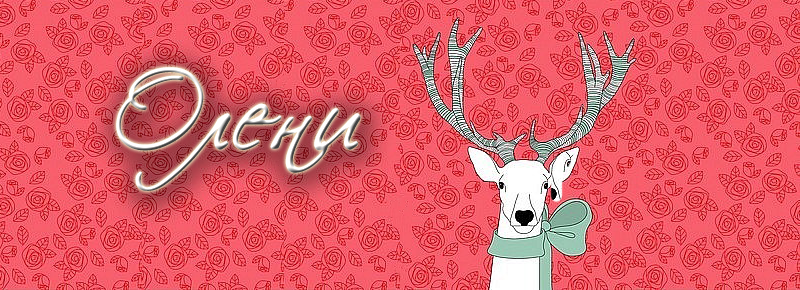
<style>
.page{position:relative;width:800px;height:290px}
.page>*{position:absolute;margin:0}
.t1{font:100px "Scriptorama";letter-spacing:0.025em;font-weight:bold}
</style>
<div class="page">
<p class="t1" style="left:116px;top:67px;width:245px;height:124px">Олени</p>
</div>
